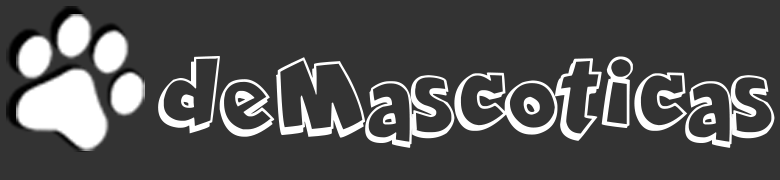
<style>
.page{position:relative;width:780px;height:180px;background:#333333}
.page>*{position:absolute;margin:0}
.t1{font:108.3px "ComicaBD";color:#ffffff}
</style>
<div class="page">
<p class="t1" style="left:158px;top:55px;width:117px;height:82px">de</p>
<p class="t1" style="left:276px;top:56px;width:499px;height:92px">Mascoticas</p>
</div>
